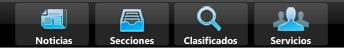
<style>
.page{position:relative;width:344px;height:48px;background:#262626}
.page>*{position:absolute;margin:0}
.t1{font:9.7px "SegoeUI-Bold";color:#ffffff}
</style>
<div class="page">
<p class="t1" style="left:36px;top:36px;width:36px;height:8px">Noticias</p>
<p class="t1" style="left:110px;top:36px;width:44px;height:8px">Secciones</p>
<p class="t1" style="left:184px;top:36px;width:53px;height:8px">Clasificados</p>
<p class="t1" style="left:271px;top:36px;width:40px;height:8px">Servicios</p>
</div>
